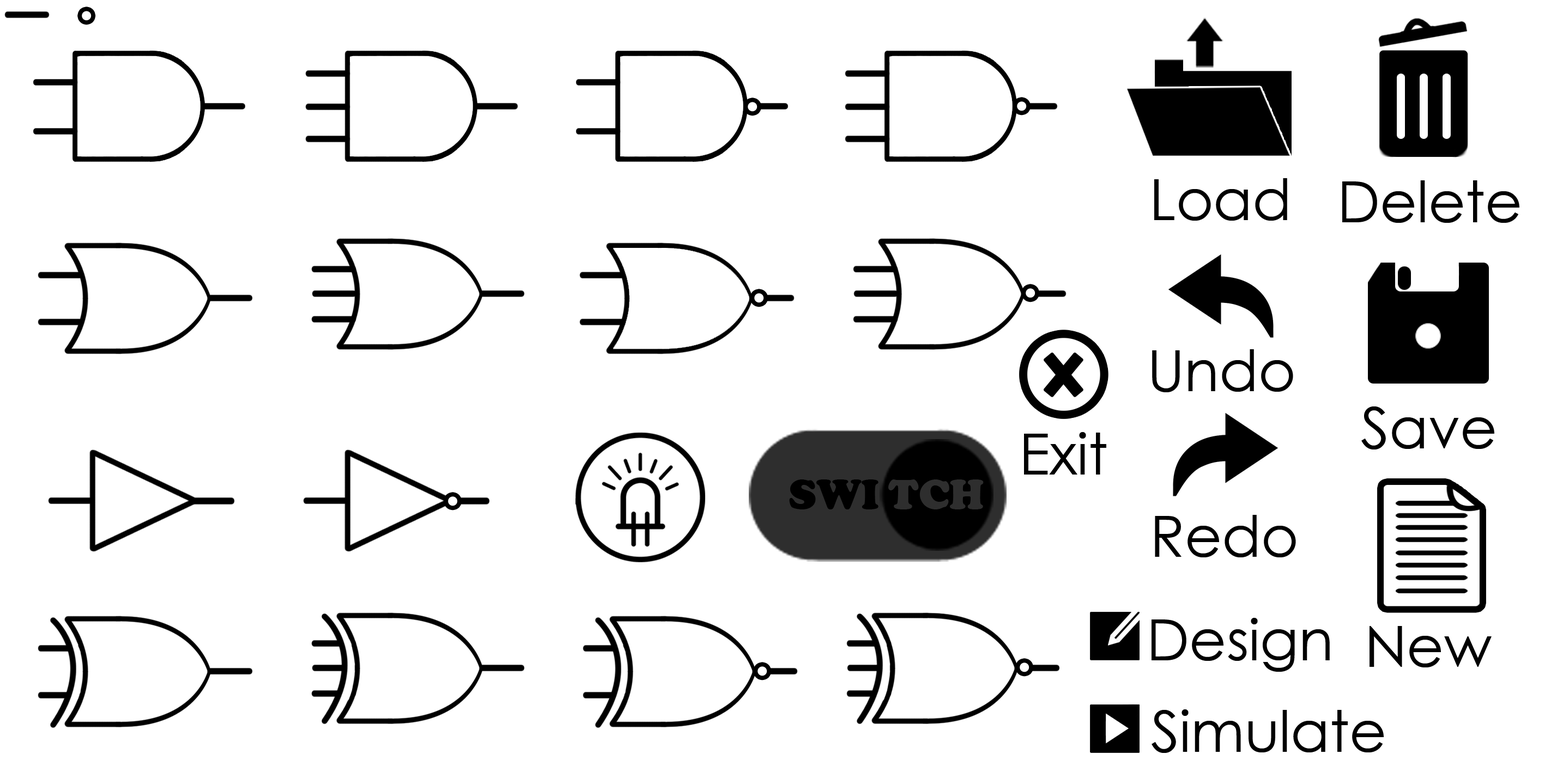
<style>
.page{position:relative;width:1545px;height:772px;background:#ffffff}
.page>*{position:absolute;margin:0}
.t1{font:57.2px "CenturyGothic";color:#000000}
.t2{font:42.9px "CooperBlack";color:#000000}
.t3{font:42.9px "CooperBlack";color:#2e2e2e}
</style>
<div class="page">
<p class="t1" style="left:1154px;top:178px;width:133px;height:43px">Load</p>
<p class="t1" style="left:1342px;top:180px;width:177px;height:43px">Delete</p>
<p class="t1" style="left:1152px;top:349px;width:141px;height:43px">Undo</p>
<p class="t1" style="left:1361px;top:406px;width:133px;height:43px">Save</p>
<p class="t1" style="left:1024px;top:432px;width:82px;height:43px">Exit</p>
<p class="t2" style="left:789px;top:479px;width:89px;height:30px">SWI</p>
<p class="t3" style="left:888px;top:479px;width:95px;height:30px">TCH</p>
<p class="t1" style="left:1154px;top:515px;width:142px;height:42px">Redo</p>
<p class="t1" style="left:1151px;top:618px;width:178px;height:54px">Design</p>
<p class="t1" style="left:1369px;top:626px;width:122px;height:41px">New</p>
<p class="t1" style="left:1151px;top:709px;width:232px;height:44px">Simulate</p>
</div>
